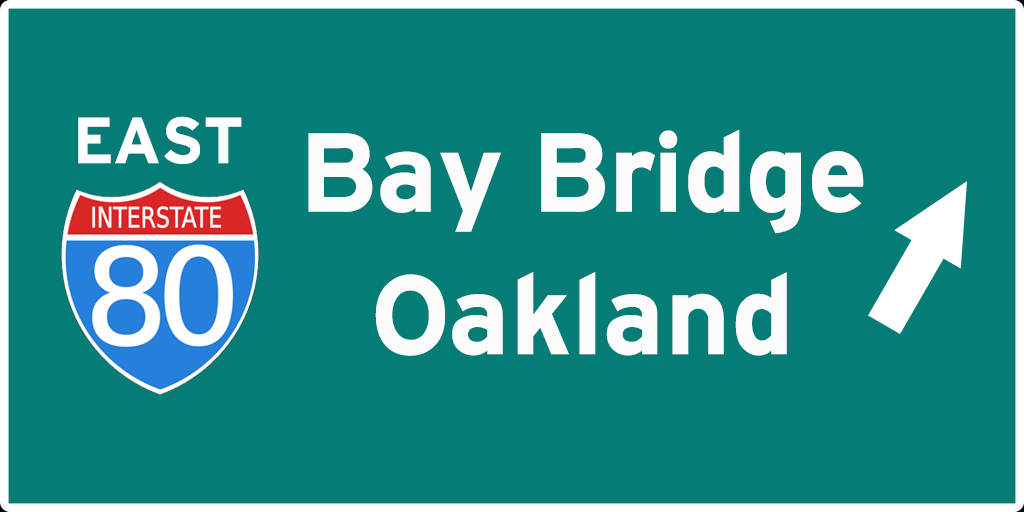
<style>
.page{position:relative;width:1024px;height:512px;background:#057c76}
.page>*{position:absolute;margin:0}
.t1{font:69px "HittheRoad";color:#ffffff}
.t2{font:118.7px "HittheRoad";color:#fbfbfb}
</style>
<div class="page">
<p class="t1" style="left:78px;top:116px;width:164px;height:48px">EAST</p>
<p class="t2" style="left:308px;top:129px;width:556px;height:227px;text-align:center">Bay Bridge<br>Oakland</p>
</div>
